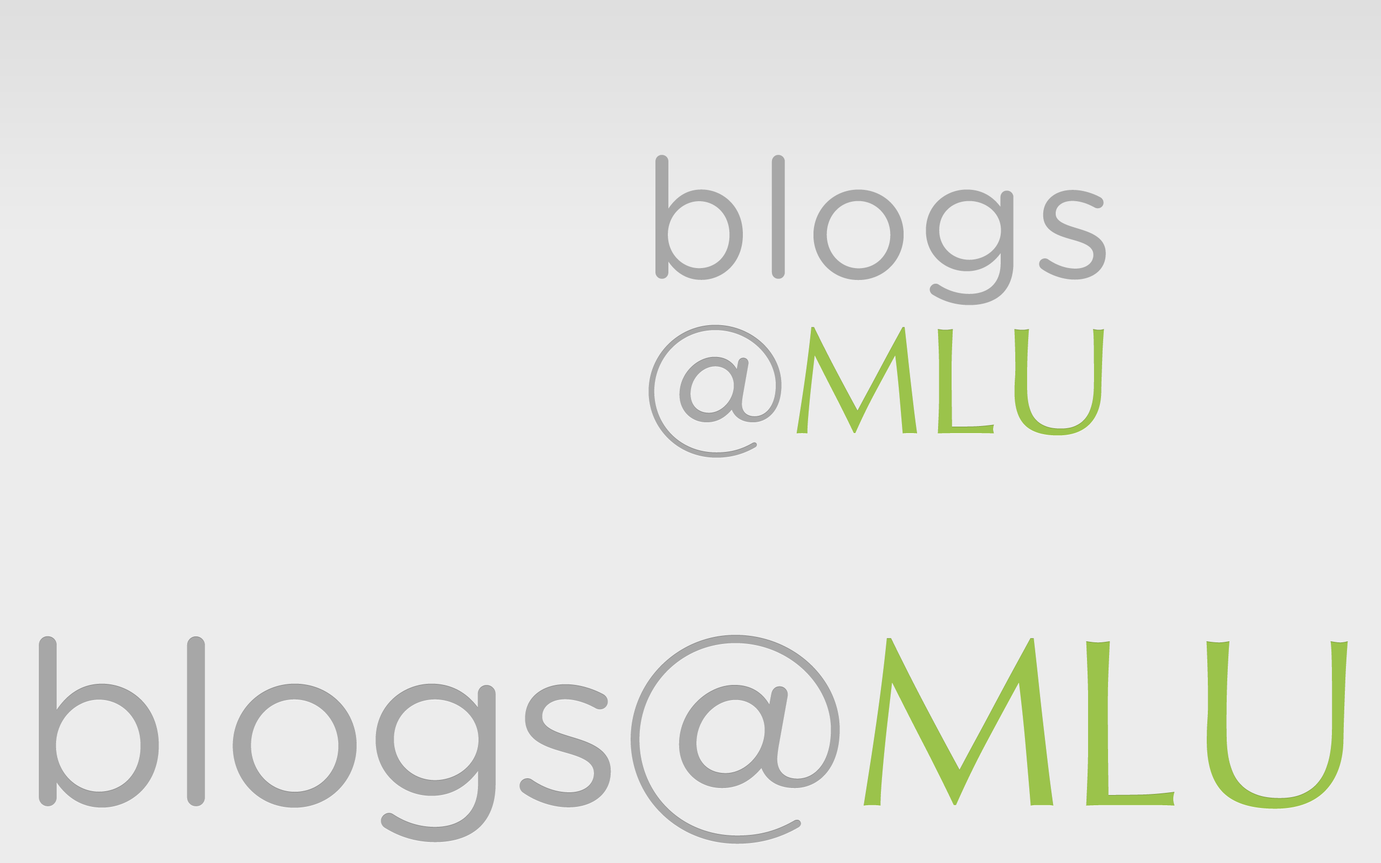
<style>
.page{position:relative;width:1381px;height:863px;background:#ececec}
.page>*{position:absolute;margin:0}
.t1{font:167.3px "GothamRounded-Book";letter-spacing:0.025em;color:#a7a7a7}
.t2{font:151.8px "Optima-Regular";color:#9bc34b}
.t3{font:151.8px "GothamRounded-Book";color:#a7a7a7}
.t4{font:229.5px "GothamRounded-Book";letter-spacing:-0.025em;color:#a7a7a7}
.t5{font:239px "GothamRounded-Book";color:#a7a7a7}
.t6{font:239px "Optima-Regular";color:#9bc34b}
</style>
<div class="page">
<p class="t1" style="left:656px;top:155px;width:450px;height:150px">blogs</p>
<p class="t2" style="left:649px;top:325px;width:455px;height:133px"><span class="t3">@</span>MLU</p>
<p class="t4" style="left:39px;top:635px;width:1309px;height:209px">blogs<span class="t5">@</span><span class="t6">MLU</span></p>
</div>
